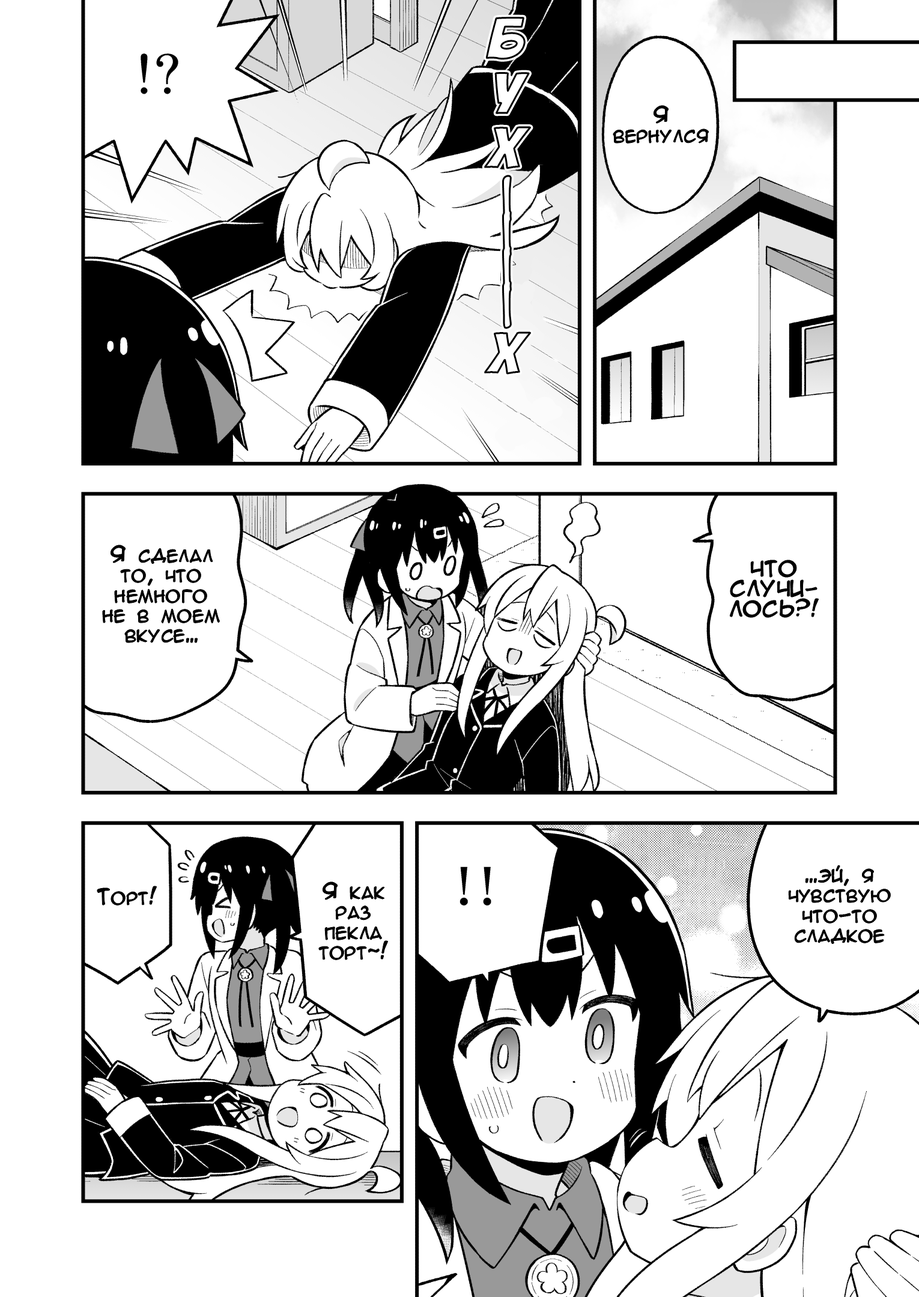
<style>
.page{position:relative;width:919px;height:1297px;background:#ffffff}
.page>*{position:absolute;margin:0}
.t1{font:20px/20px "AnimeAcev3";color:#000000}
.t2{font:20px "AnimeAcev3";color:#000000}
</style>
<div class="page">
<p class="t1" style="left:613px;top:106px;width:96px;height:38px;text-align:center">Я<br>вернулся</p>
<p class="t1" style="left:103px;top:545px;width:117px;height:98px;text-align:center">Я сделал<br>то, что<br>немного<br>не в моем<br>вкусе...</p>
<p class="t1" style="left:730px;top:560px;width:89px;height:58px;text-align:center">ЧТО<br>СЛУЧИ-<br>ЛОСЬ?!</p>
<p class="t1" style="left:789px;top:866px;width:102px;height:78px;text-align:center">...эй, я<br>чувствую<br>что-то<br>сладкое</p>
<p class="t2" style="left:97px;top:887px;width:60px;height:19px">Торт!</p>
<p class="t1" style="left:319px;top:882px;width:69px;height:78px;text-align:center">Я как<br>раз<br>пекла<br>торт~!</p>
</div>
